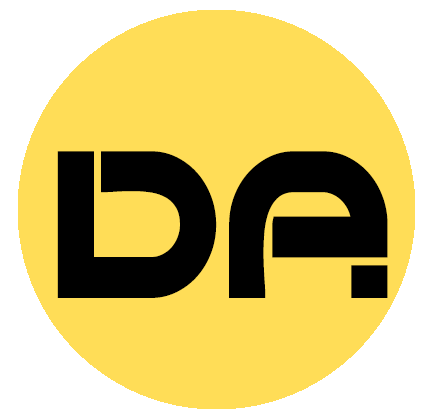
<style>
.page{position:relative;width:433px;height:419px;background:#ffdd57}
.page>*{position:absolute;margin:0}
.t1{font:219.3px "Forvertz-Regular";color:#000000;scale:0.88 1}
</style>
<div class="page">
<p class="t1" style="left:57px;top:151px;width:331px;height:147px">DA</p>
</div>
